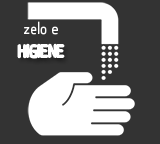
<style>
.page{position:relative;width:160px;height:144px;background:#333333}
.page>*{position:absolute;margin:0}
.t1{font:16.7px "qontra-Regular";color:#ffffff}
</style>
<div class="page">
<p class="t1" style="left:24px;top:21px;width:34px;height:14px">zelo e</p>
<p class="t1" style="left:18px;top:44px;width:46px;height:14px">HIGIENE</p>
</div>
